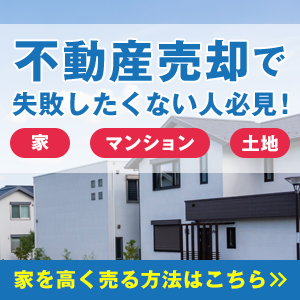
<style>
.page{position:relative;width:300px;height:300px}
.page>*{position:absolute;margin:0}
.t1{font:45px "GothicMB101Pro-Bold";letter-spacing:0.06em;color:#1872b8}
.t2{font:34px "GothicMB101Pro-Bold";letter-spacing:0.06em;color:#1872b8}
.t3{font:26px "GothicMB101Pro-Bold";letter-spacing:0.02em;color:#1872b8}
.t4{font:18px "GothicMB101Pro-Bold";letter-spacing:0.06em;color:#ffffff}
.t5{font:20px "GothicMB101Pro-Bold";letter-spacing:0.06em;color:#fcff00}
</style>
<div class="page">
<p class="t1" style="left:14px;top:39px;width:271px;height:44px">不動産売却<span class="t2">で</span></p>
<p class="t3" style="left:12px;top:91px;width:276px;height:26px">失敗したくない人必見！</p>
<p class="t4" style="left:31px;top:134px;width:18px;height:17px">家</p>
<p class="t4" style="left:106px;top:134px;width:88px;height:18px">マンション</p>
<p class="t4" style="left:242px;top:134px;width:37px;height:18px">土地</p>
<p class="t5" style="left:14px;top:269px;width:251px;height:20px">家を高く売る方法はこちら</p>
</div>
